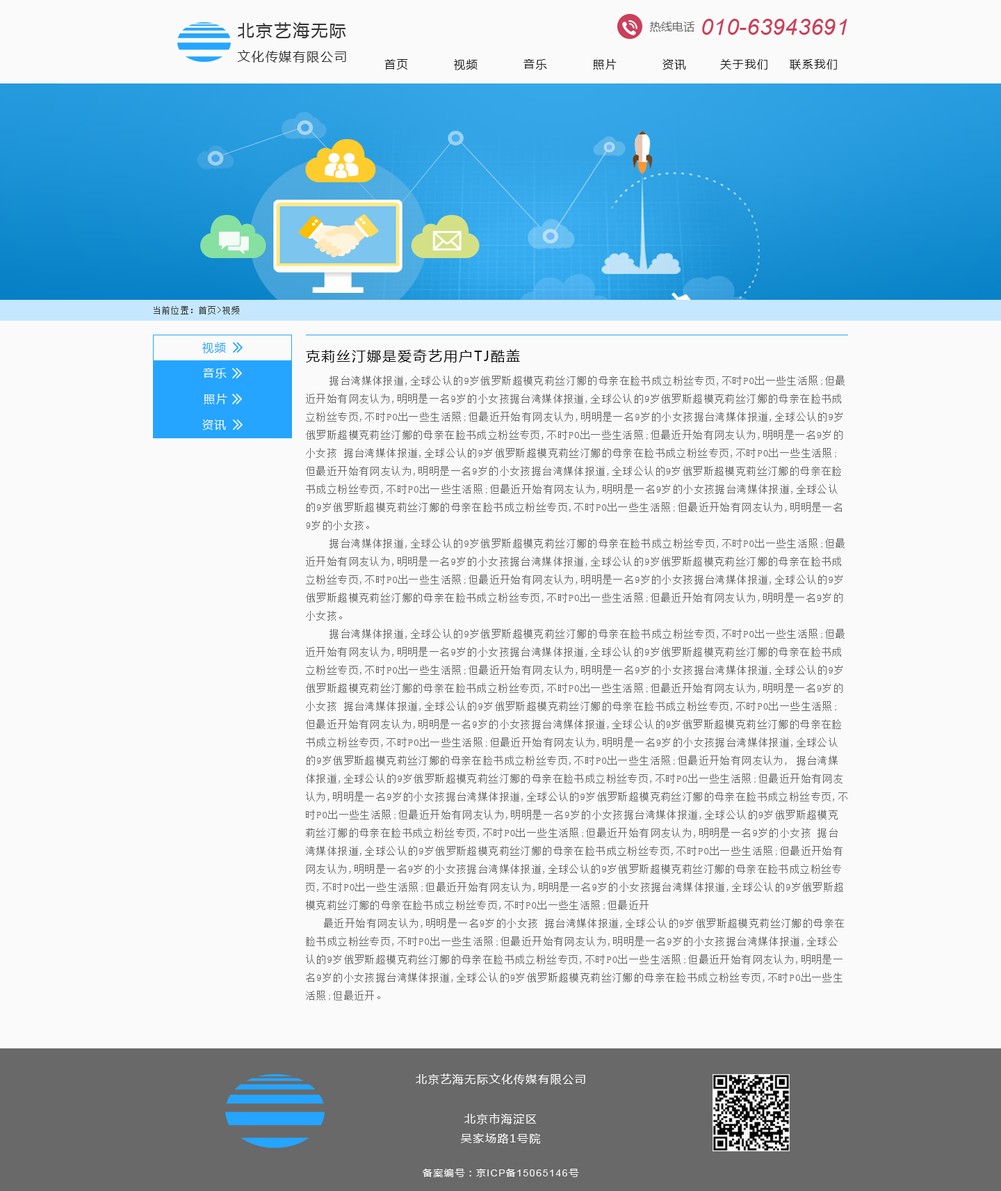
<style>
.page{position:relative;width:1001px;height:1191px;background:#fafafa}
.page>*{position:absolute;margin:0}
.t1{font:16.7px "MicrosoftYaHei";letter-spacing:0.1em;color:#333333}
.t2{font:11.1px "MicrosoftYaHei";letter-spacing:0.01em;color:#666666}
.t3{font:22.3px "Arial-ItalicMT";letter-spacing:0.01em;color:#cb3f5a}
.t4{font:12.6px "MicrosoftYaHei";letter-spacing:0.1em;color:#333333}
.t5{font:11.1px "MicrosoftYaHei";letter-spacing:0.1em;color:#1a1a1a}
.t6{font:8.3px "SimSun";letter-spacing:0.1em;color:#333333}
.t7{font:11.1px "MicrosoftYaHei";letter-spacing:0.1em;color:#25a5ff}
.t8{font:13.9px "MicrosoftYaHei";letter-spacing:0.1em;color:#0d0d0d}
.t9{font:11.1px "MicrosoftYaHei";letter-spacing:0.1em;color:#fafafa}
.t10{font:9.7px/18.1px "SimSun";letter-spacing:0.1em;color:#666666}
.t11{font:9.7px "ArialMT";letter-spacing:0.1em;color:#fafafa}
.t12{font:9.7px "MicrosoftYaHei";letter-spacing:0.1em;color:#fafafa}
</style>
<div class="page">
<p class="t1" style="left:238px;top:22px;width:108px;height:16px">北京艺海无际</p>
<p class="t2" style="left:650px;top:22px;width:45px;height:10px">热线电话</p>
<p class="t3" style="left:702px;top:19px;width:146px;height:16px">010-63943691</p>
<p class="t4" style="left:238px;top:50px;width:108px;height:13px">文化传媒有限公司</p>
<p class="t5" style="left:385px;top:59px;width:23px;height:11px">首页</p>
<p class="t5" style="left:454px;top:59px;width:24px;height:11px">视频</p>
<p class="t5" style="left:524px;top:59px;width:23px;height:11px">音乐</p>
<p class="t5" style="left:593px;top:59px;width:24px;height:11px">照片</p>
<p class="t5" style="left:663px;top:59px;width:23px;height:11px">资讯</p>
<p class="t5" style="left:721px;top:59px;width:47px;height:11px">关于我们</p>
<p class="t5" style="left:790px;top:59px;width:47px;height:11px">联系我们</p>
<p class="t6" style="left:154px;top:306px;width:85px;height:8px">当前位置：首页&gt;视频</p>
<p class="t7" style="left:202px;top:342px;width:24px;height:11px">视频</p>
<p class="t8" style="left:306px;top:349px;width:214px;height:13px">克莉丝汀娜是爱奇艺用户TJ酷盖</p>
<p class="t9" style="left:203px;top:368px;width:24px;height:10px">音乐</p>
<p class="t10" style="left:306px;top:376px;width:542px;height:624px">据台湾媒体报道,全球公认的9岁俄罗斯超模克莉丝汀娜的母亲在脸书成立粉丝专页,不时PO出一些生活照;但最近开始有网友认为,明明是一名9岁的小女孩据台湾媒体报道,全球公认的9岁俄罗斯超模克莉丝汀娜的母亲在脸书成立粉丝专页,不时PO出一些生活照;但最近开始有网友认为,明明是一名9岁的小女孩据台湾媒体报道,全球公认的9岁俄罗斯超模克莉丝汀娜的母亲在脸书成立粉丝专页,不时PO出一些生活照;但最近开始有网友认为,明明是一名9岁的小女孩 据台湾媒体报道,全球公认的9岁俄罗斯超模克莉丝汀娜的母亲在脸书成立粉丝专页,不时PO出一些生活照;但最近开始有网友认为,明明是一名9岁的小女孩据台湾媒体报道,全球公认的9岁俄罗斯超模克莉丝汀娜的母亲在脸书成立粉丝专页,不时PO出一些生活照;但最近开始有网友认为,明明是一名9岁的小女孩据台湾媒体报道,全球公认的9岁俄罗斯超模克莉丝汀娜的母亲在脸书成立粉丝专页,不时PO出一些生活照;但最近开始有网友认为,明明是一名9岁的小女孩。<br> 据台湾媒体报道,全球公认的9岁俄罗斯超模克莉丝汀娜的母亲在脸书成立粉丝专页,不时PO出一些生活照;但最近开始有网友认为,明明是一名9岁的小女孩据台湾媒体报道,全球公认的9岁俄罗斯超模克莉丝汀娜的母亲在脸书成立粉丝专页,不时PO出一些生活照;但最近开始有网友认为,明明是一名9岁的小女孩据台湾媒体报道,全球公认的9岁俄罗斯超模克莉丝汀娜的母亲在脸书成立粉丝专页,不时PO出一些生活照;但最近开始有网友认为,明明是一名9岁的小女孩。<br> 据台湾媒体报道,全球公认的9岁俄罗斯超模克莉丝汀娜的母亲在脸书成立粉丝专页,不时PO出一些生活照;但最近开始有网友认为,明明是一名9岁的小女孩据台湾媒体报道,全球公认的9岁俄罗斯超模克莉丝汀娜的母亲在脸书成立粉丝专页,不时PO出一些生活照;但最近开始有网友认为,明明是一名9岁的小女孩据台湾媒体报道,全球公认的9岁俄罗斯超模克莉丝汀娜的母亲在脸书成立粉丝专页,不时PO出一些生活照;但最近开始有网友认为,明明是一名9岁的小女孩 据台湾媒体报道,全球公认的9岁俄罗斯超模克莉丝汀娜的母亲在脸书成立粉丝专页,不时PO出一些生活照;但最近开始有网友认为,明明是一名9岁的小女孩据台湾媒体报道,全球公认的9岁俄罗斯超模克莉丝汀娜的母亲在脸书成立粉丝专页,不时PO出一些生活照;但最近开始有网友认为,明明是一名9岁的小女孩据台湾媒体报道,全球公认的9岁俄罗斯超模克莉丝汀娜的母亲在脸书成立粉丝专页,不时PO出一些生活照;但最近开始有网友认为, 据台湾媒体报道,全球公认的9岁俄罗斯超模克莉丝汀娜的母亲在脸书成立粉丝专页,不时PO出一些生活照;但最近开始有网友认为,明明是一名9岁的小女孩据台湾媒体报道,全球公认的9岁俄罗斯超模克莉丝汀娜的母亲在脸书成立粉丝专页,不时PO出一些生活照;但最近开始有网友认为,明明是一名9岁的小女孩据台湾媒体报道,全球公认的9岁俄罗斯超模克莉丝汀娜的母亲在脸书成立粉丝专页,不时PO出一些生活照;但最近开始有网友认为,明明是一名9岁的小女孩 据台湾媒体报道,全球公认的9岁俄罗斯超模克莉丝汀娜的母亲在脸书成立粉丝专页,不时PO出一些生活照;但最近开始有网友认为,明明是一名9岁的小女孩据台湾媒体报道,全球公认的9岁俄罗斯超模克莉丝汀娜的母亲在脸书成立粉丝专页,不时PO出一些生活照;但最近开始有网友认为,明明是一名9岁的小女孩据台湾媒体报道,全球公认的9岁俄罗斯超模克莉丝汀娜的母亲在脸书成立粉丝专页,不时PO出一些生活照;但最近开<br>最近开始有网友认为,明明是一名9岁的小女孩 据台湾媒体报道,全球公认的9岁俄罗斯超模克莉丝汀娜的母亲在脸书成立粉丝专页,不时PO出一些生活照;但最近开始有网友认为,明明是一名9岁的小女孩据台湾媒体报道,全球公认的9岁俄罗斯超模克莉丝汀娜的母亲在脸书成立粉丝专页,不时PO出一些生活照;但最近开始有网友认为,明明是一名9岁的小女孩据台湾媒体报道,全球公认的9岁俄罗斯超模克莉丝汀娜的母亲在脸书成立粉丝专页,不时PO出一些生活照;但最近开。</p>
<p class="t9" style="left:204px;top:394px;width:23px;height:10px">照片</p>
<p class="t9" style="left:202px;top:419px;width:24px;height:11px">资讯</p>
<p class="t9" style="left:416px;top:1073px;width:170px;height:11px">北京艺海无际文化传媒有限公司</p>
<p class="t9" style="left:461px;top:1113px;width:79px;height:30px;text-align:center">北京市海淀区<br>吴家场路1号院</p>
<p class="t11" style="left:423px;top:1168px;width:156px;height:9px"><span class="t12">备案编号：京</span>ICP<span class="t12">备</span>15065146<span class="t12">号</span></p>
</div>
